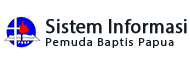
<style>
.page{position:relative;width:190px;height:64px;background:#ffffff}
.page>*{position:absolute;margin:0}
.t1{font:19.5px "MyriadPro-Regular";color:#111b21;font-weight:bold}
.t2{font:11.9px "MyriadPro-Regular";letter-spacing:0.1em;color:#111b21}
</style>
<div class="page">
<p class="t1" style="left:46px;top:19px;width:141px;height:15px">Sistem Informasi</p>
<p class="t2" style="left:46px;top:37px;width:128px;height:11px">Pemuda Baptis Papua</p>
</div>
